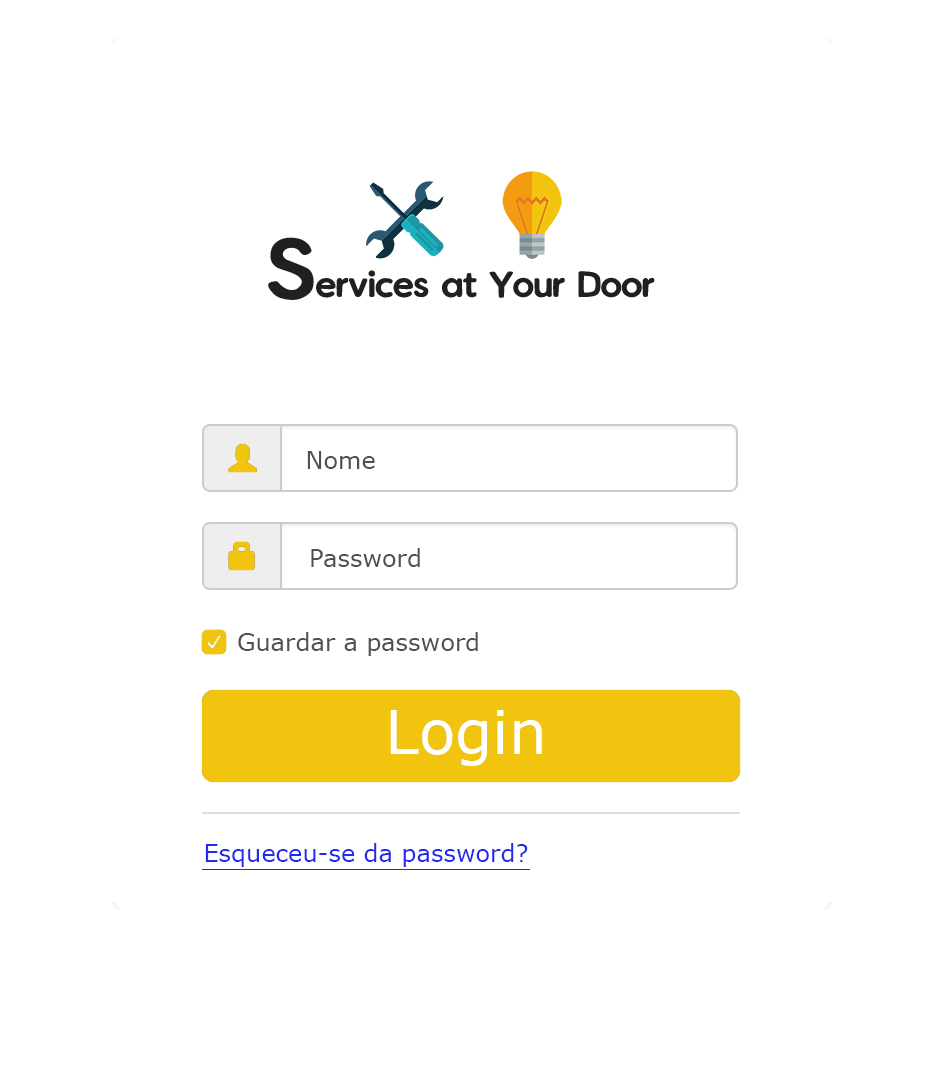
<style>
.page{position:relative;width:942px;height:1080px;background:#ffffff}
.page>*{position:absolute;margin:0}
.t1{font:24px "Verdana";color:#564e4e}
.t2{font:12px "Verdana";color:#564e4e}
.t3{font:60px "Verdana";color:#ffffff}
.t4{font:24px "Verdana";color:#212aee}
</style>
<div class="page">
<p class="t1" style="left:307px;top:451px;width:68px;height:18px">Nome</p>
<p class="t2" style="left:311px;top:548px;width:109px;height:19px">Password</p>
<p class="t2" style="left:238px;top:632px;width:240px;height:24px;text-align:center">Guardar a password</p>
<p class="t3" style="left:390px;top:710px;width:152px;height:56px">Login</p>
<p class="t4" style="left:205px;top:843px;width:323px;height:24px">Esqueceu-se da password?</p>
</div>
